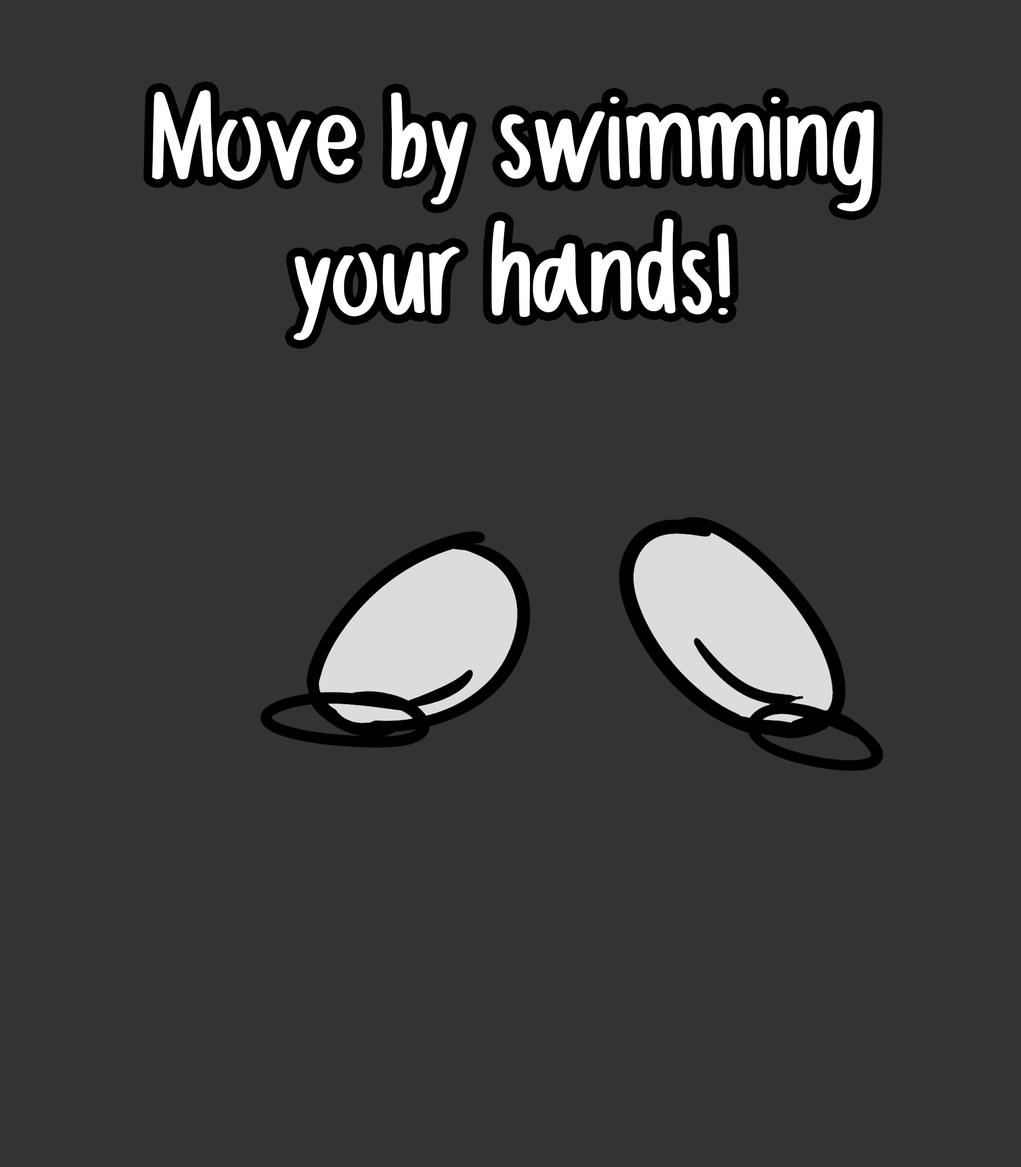
<style>
.page{position:relative;width:1021px;height:1167px;background:#333333}
.page>*{position:absolute;margin:0}
.t1{font:174.9px/135.8px "JustForFun-Regular";color:#ffffff;scale:0.69 1}
</style>
<div class="page">
<p class="t1" style="left:152px;top:90px;width:723px;height:250px;text-align:center">Move by swimming<br>your hands!</p>
</div>
